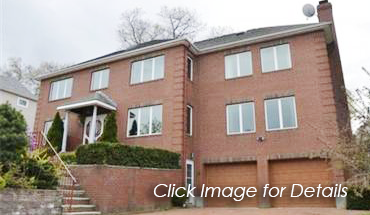
<style>
.page{position:relative;width:370px;height:215px}
.page>*{position:absolute;margin:0}
.t1{font:18px "CenturyGothic";color:#ffffff;font-style:italic}
</style>
<div class="page">
<p class="t1" style="left:153px;top:184px;width:195px;height:17px">Click Image for Details</p>
</div>
